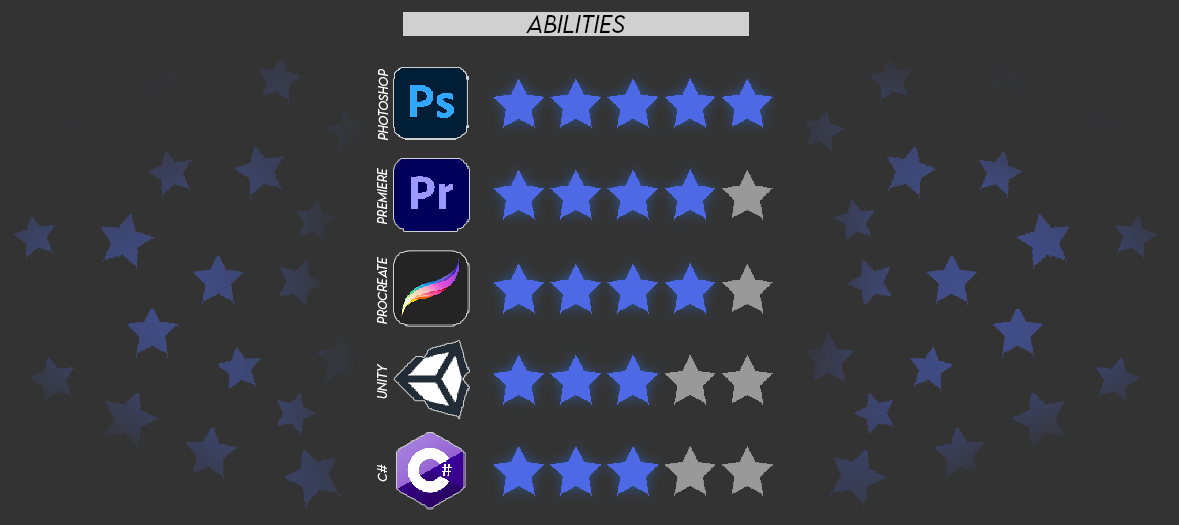
<style>
.page{position:relative;width:1179px;height:525px;background:#333333}
.page>*{position:absolute;margin:0}
.t1{font:22px "LEMONMILK-LightItalic";color:#000000}
.t2{font:11.5px "LEMONMILK-LightItalic";color:#ffffff}
</style>
<div class="page">
<p class="t1" style="left:526px;top:15px;width:99px;height:18px">abilities</p>
<p class="t2" style="left:378px;top:69px;width:10px;height:72px;rotate:-90deg">photoshop</p>
<p class="t2" style="left:377px;top:168px;width:10px;height:57px;rotate:-90deg">premiere</p>
<p class="t2" style="left:377px;top:256px;width:10px;height:68px;rotate:-90deg">procreate</p>
<p class="t2" style="left:377px;top:363px;width:10px;height:36px;rotate:-90deg">unity</p>
<p class="t2" style="left:377px;top:464px;width:10px;height:18px;rotate:-90deg">c#</p>
</div>
